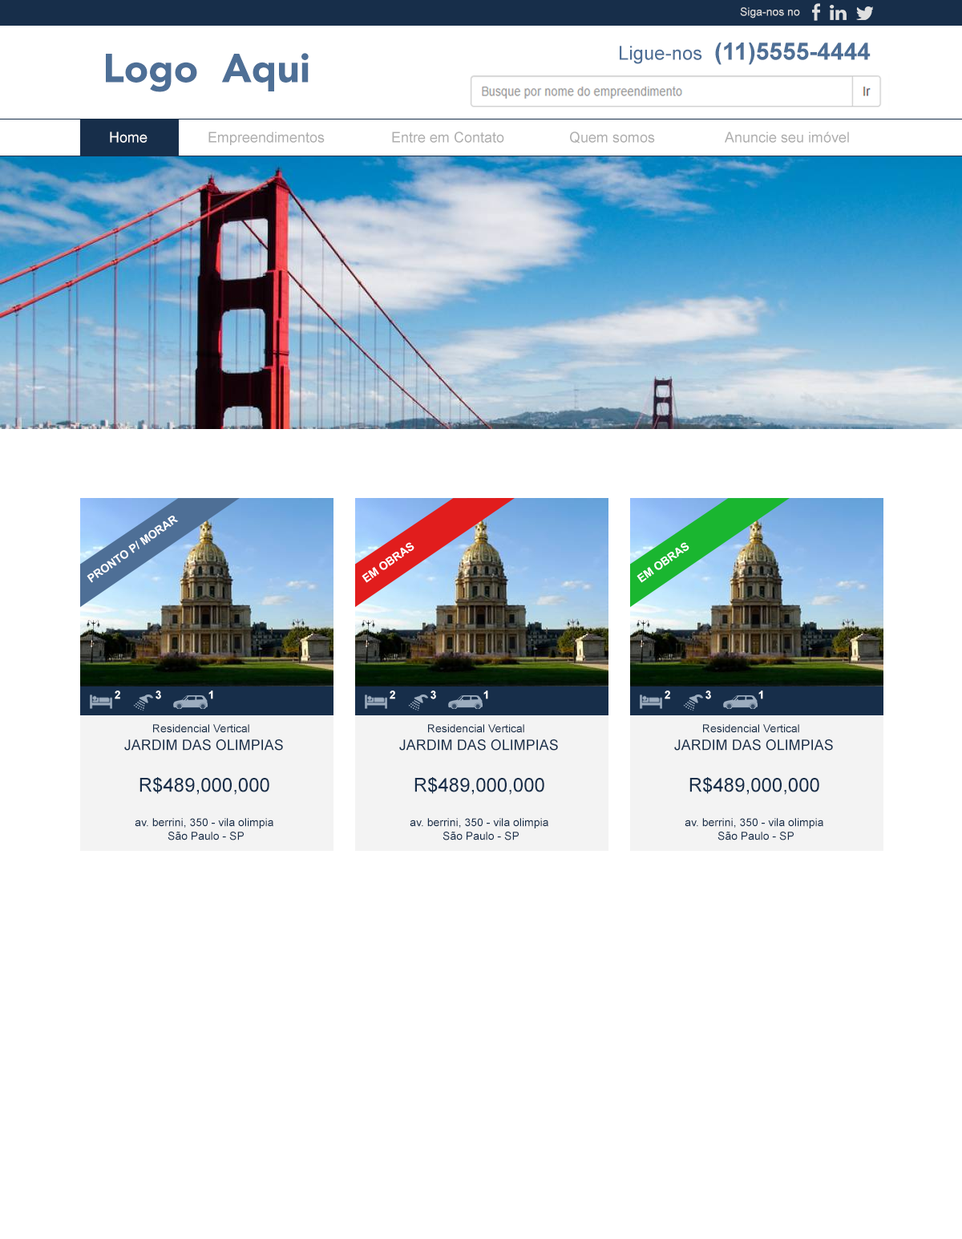
<style>
.page{position:relative;width:962px;height:1239px;background:#ffffff}
.page>*{position:absolute;margin:0}
.t1{font:11.2px "ArialMT";color:#dedede}
.t2{font:40.1px "AvenirLTStd-Black";color:#4e6f96}
.t3{font:19.2px "ArialMT";color:#4e6f96}
.t4{font:24.1px "Arial-BoldMT";color:#4e6f96}
.t5{font:14.4px "ArialMT";color:#ffffff}
.t6{font:14.4px "ArialMT";color:#adadad}
.t7{font:11.2px "Arial-BoldMT";color:#ffffff}
.t8{font:11.2px "ArialMT";color:#172e4a}
.t9{font:14.4px "ArialMT";color:#172e4a}
.t10{font:19.2px "ArialMT";color:#172e4a}
.t11{font:11.2px/13.6px "ArialMT";color:#172e4a}
</style>
<div class="page">
<p class="t1" style="left:740px;top:7px;width:60px;height:11px">Siga-nos no</p>
<p class="t2" style="left:106px;top:53px;width:203px;height:39px">Logo  Aqui</p>
<p class="t3" style="left:620px;top:46px;width:83px;height:18px">Ligue-nos</p>
<p class="t4" style="left:715px;top:43px;width:156px;height:22px">(11)5555-4444</p>
<p class="t5" style="left:110px;top:132px;width:38px;height:11px">Home</p>
<p class="t6" style="left:209px;top:132px;width:116px;height:13px">Empreendimentos</p>
<p class="t6" style="left:392px;top:132px;width:112px;height:11px">Entre em Contato</p>
<p class="t6" style="left:570px;top:132px;width:85px;height:12px">Quem somos</p>
<p class="t6" style="left:725px;top:132px;width:124px;height:11px">Anuncie seu imóvel</p>
<p class="t7" style="left:87px;top:516px;width:92px;height:67px;rotate:-35deg">PRONTO P/ MORAR</p>
<p class="t7" style="left:362px;top:542px;width:53px;height:41px;rotate:-35deg">EM OBRAS</p>
<p class="t7" style="left:637px;top:542px;width:53px;height:41px;rotate:-35deg">EM OBRAS</p>
<p class="t7" style="left:115px;top:691px;width:5px;height:8px">2</p>
<p class="t7" style="left:156px;top:691px;width:5px;height:8px">3</p>
<p class="t7" style="left:209px;top:691px;width:4px;height:8px">1</p>
<p class="t7" style="left:390px;top:691px;width:5px;height:8px">2</p>
<p class="t7" style="left:431px;top:691px;width:5px;height:8px">3</p>
<p class="t7" style="left:484px;top:691px;width:4px;height:8px">1</p>
<p class="t7" style="left:665px;top:691px;width:5px;height:8px">2</p>
<p class="t7" style="left:706px;top:691px;width:5px;height:8px">3</p>
<p class="t7" style="left:759px;top:691px;width:4px;height:8px">1</p>
<p class="t8" style="left:153px;top:724px;width:96px;height:9px">Residencial Vertical</p>
<p class="t8" style="left:428px;top:724px;width:96px;height:9px">Residencial Vertical</p>
<p class="t8" style="left:703px;top:724px;width:97px;height:9px">Residencial Vertical</p>
<p class="t9" style="left:124px;top:739px;width:159px;height:12px">JARDIM DAS OLIMPIAS</p>
<p class="t9" style="left:399px;top:739px;width:159px;height:12px">JARDIM DAS OLIMPIAS</p>
<p class="t9" style="left:674px;top:739px;width:159px;height:12px">JARDIM DAS OLIMPIAS</p>
<p class="t10" style="left:140px;top:777px;width:129px;height:18px">R$489,000,000</p>
<p class="t10" style="left:415px;top:777px;width:130px;height:18px">R$489,000,000</p>
<p class="t10" style="left:690px;top:777px;width:130px;height:18px">R$489,000,000</p>
<p class="t11" style="left:135px;top:818px;width:138px;height:22px;text-align:center">av. berrini, 350 - vila olimpia <br>São Paulo - SP</p>
<p class="t11" style="left:410px;top:818px;width:139px;height:22px;text-align:center">av. berrini, 350 - vila olimpia <br>São Paulo - SP</p>
<p class="t11" style="left:685px;top:818px;width:139px;height:22px;text-align:center">av. berrini, 350 - vila olimpia <br>São Paulo - SP</p>
</div>
